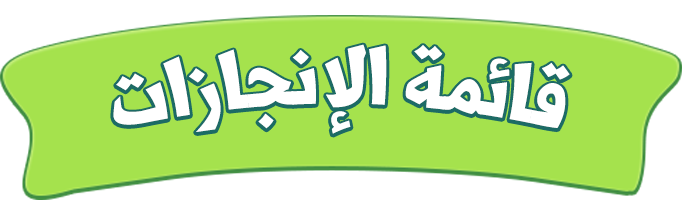
<style>
.page{position:relative;width:682px;height:200px;background:#a5e24d}
.page>*{position:absolute;margin:0}
.t1{font:99px "Shorooq_N1";color:#ffffff}
</style>
<div class="page">
<p class="t1" style="left:113px;top:44px;width:457px;height:90px">قائمة الإنجازات</p>
</div>
